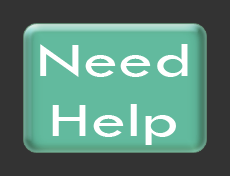
<style>
.page{position:relative;width:230px;height:176px;background:#333333}
.page>*{position:absolute;margin:0}
.t1{font:50px "TwCenMT-Regular";color:#ffffff;scale:1.4 1}
</style>
<div class="page">
<p class="t1" style="left:40px;top:44px;width:148px;height:101px;text-align:center">Need<br>Help</p>
</div>
